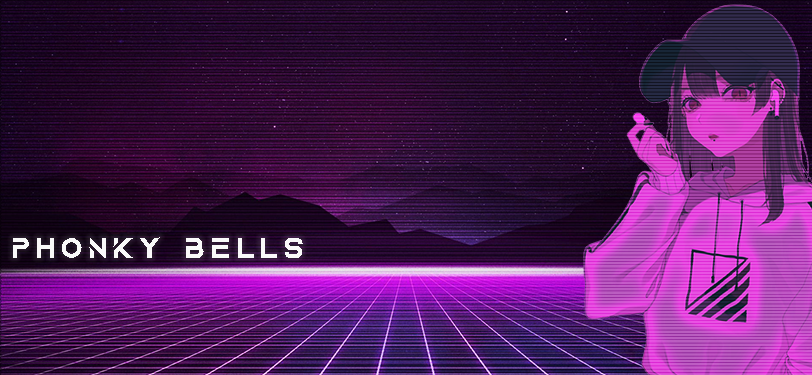
<style>
.page{position:relative;width:812px;height:375px}
.page>*{position:absolute;margin:0}
.t1{font:30.4px "AquireBold";letter-spacing:0.16em;color:#ffffff}
</style>
<div class="page">
<p class="t1" style="left:13px;top:237px;width:290px;height:21px;opacity:0.97">PHONKY BELLS</p>
</div>
